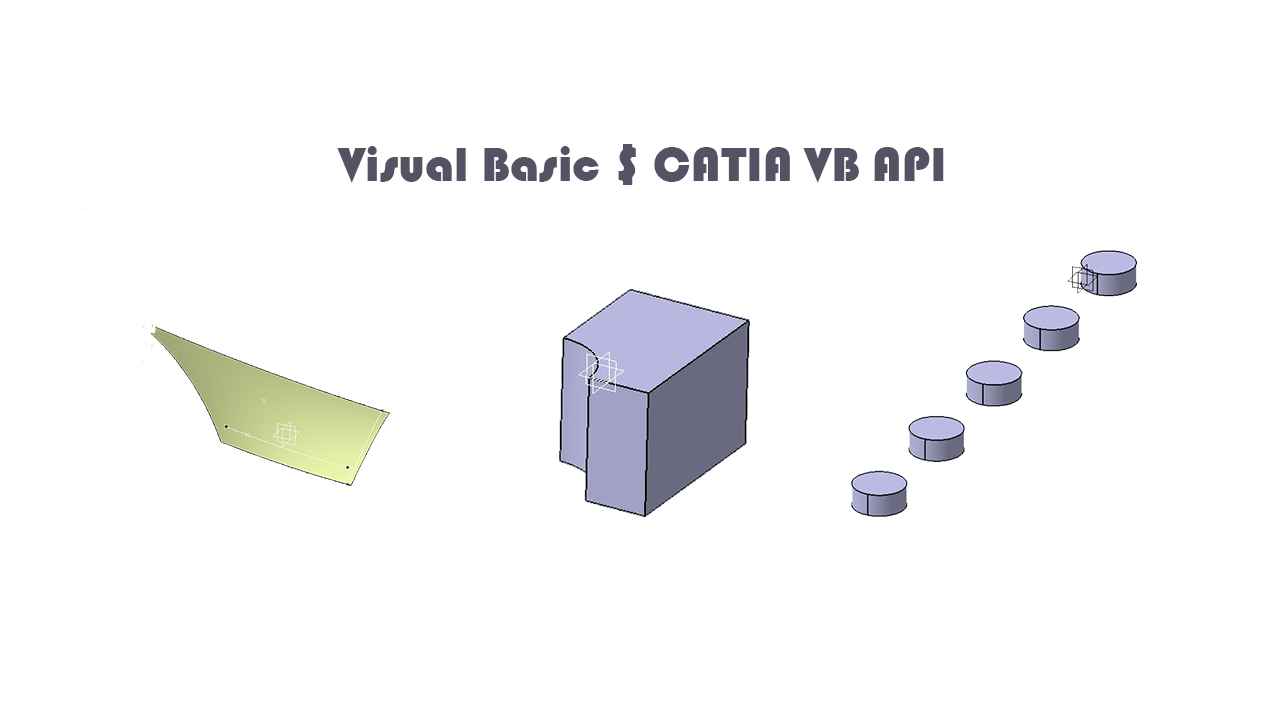
<style>
.page{position:relative;width:1280px;height:720px;background:#ffffff}
.page>*{position:absolute;margin:0}
.t1{font:12px "Bauhaus93";color:#535364}
</style>
<div class="page">
<p class="t1" style="left:337px;top:144px;width:607px;height:41px">Visual Basic $ CATIA VB API</p>
</div>
